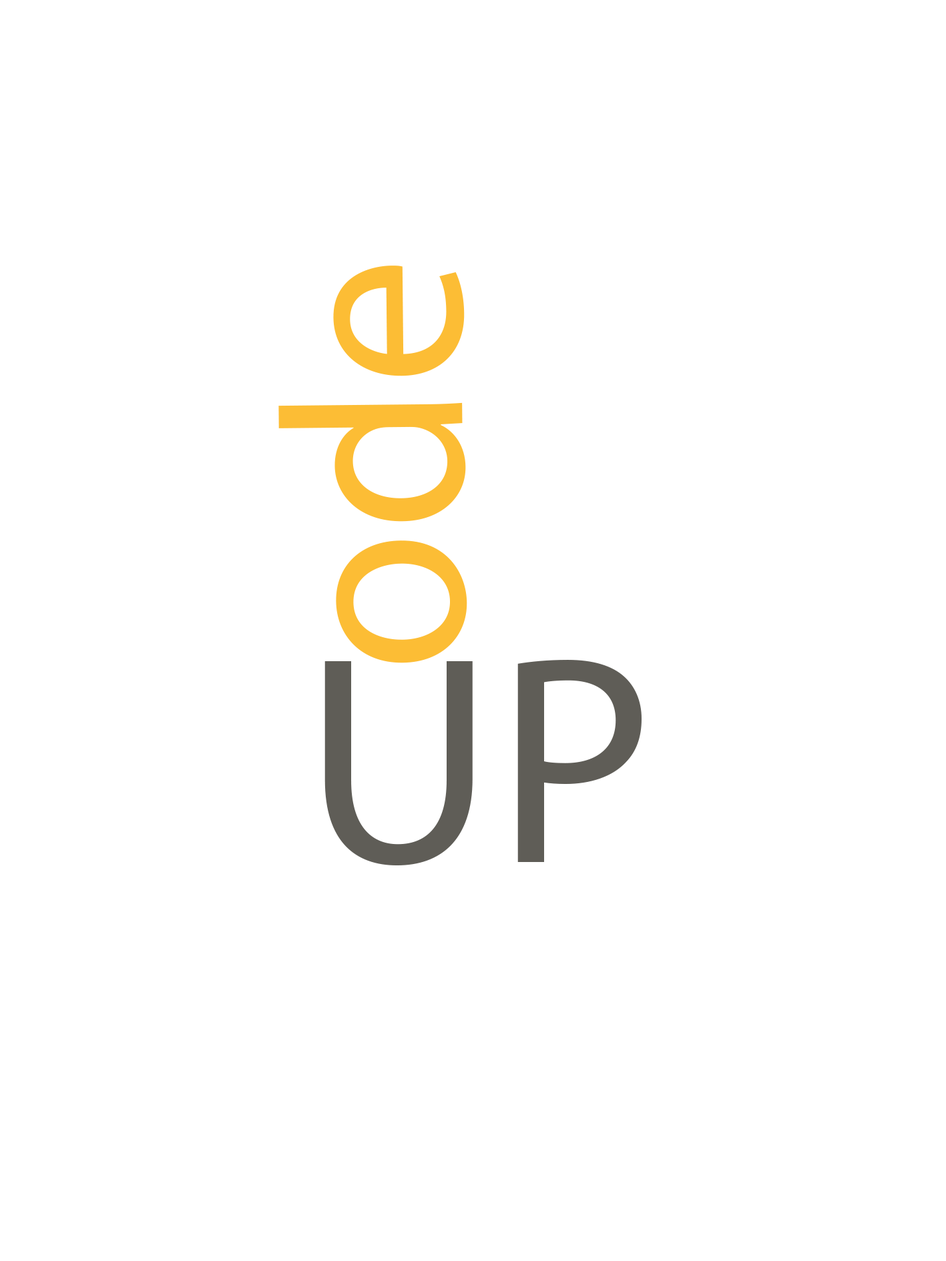
<style>
.page{position:relative;width:946px;height:1261px;background:#ffffff}
.page>*{position:absolute;margin:0}
.t1{font:361.4px "MyriadArabic-Regular";color:#fcbd35}
.t2{font:417px "MyriadArabic-Regular";color:#5f5d57}
</style>
<div class="page">
<p class="t1" style="left:278px;top:266px;width:189px;height:397px;rotate:-91deg">ode</p>
<p class="t2" style="left:324px;top:660px;width:317px;height:205px">UP</p>
</div>
